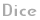
<style>
.page{position:relative;width:40px;height:20px;background:#ffffff}
.page>*{position:absolute;margin:0}
.t1{font:15.9px "ArchitecturePlain";color:#aaaaaa;scale:1.8 1}
</style>
<div class="page">
<p class="t1" style="left:3px;top:3px;width:34px;height:13px">Dice</p>
</div>
